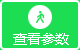
<style>
.page{position:relative;width:80px;height:50px;background:#1ddd53}
.page>*{position:absolute;margin:0}
.t1{font:13.5px "MicrosoftYaHeiUI";color:#ffffff}
</style>
<div class="page">
<p class="t1" style="left:13px;top:33px;width:56px;height:12px">查看参数</p>
</div>
